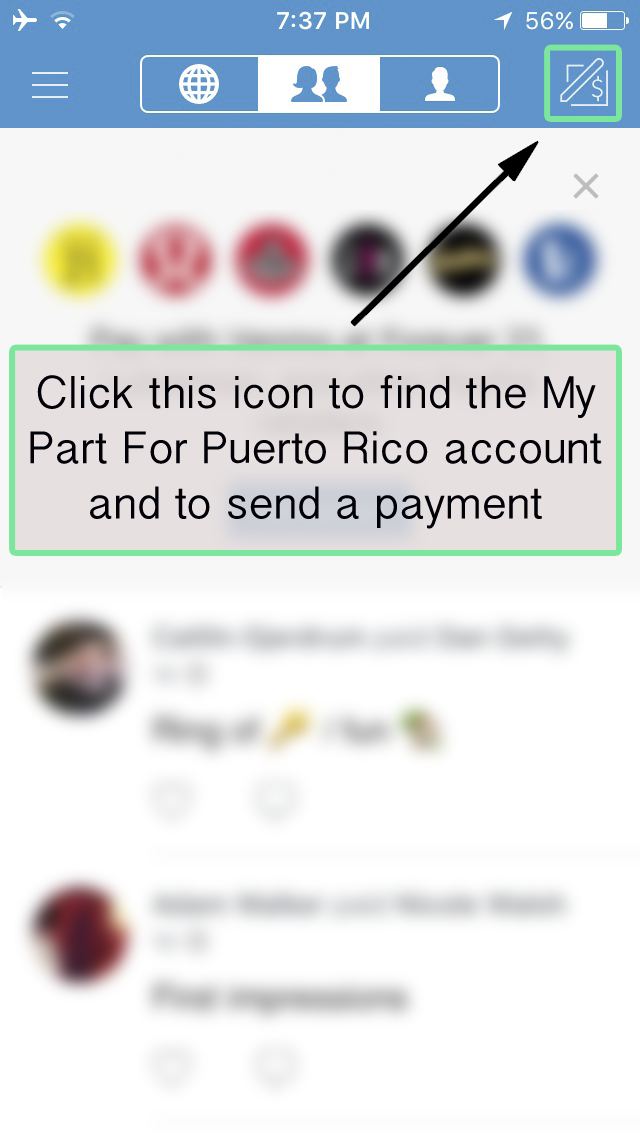
<style>
.page{position:relative;width:640px;height:1136px;background:#ffffff}
.page>*{position:absolute;margin:0}
.t1{font:46px "GujaratiSangamMN";color:#010007}
</style>
<div class="page">
<p class="t1" style="left:30px;top:375px;width:572px;height:154px;text-align:center">Click this icon to find the My Part For Puerto Rico account and to send a payment</p>
</div>
